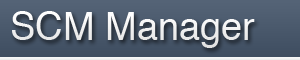
<style>
.page{position:relative;width:300px;height:60px}
.page>*{position:absolute;margin:0}
.t1{font:38px "Helvetica";color:#ffffff}
</style>
<div class="page">
<p class="t1" style="left:12px;top:11px;width:243px;height:37px">SCM Manager</p>
</div>
